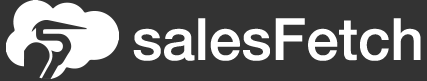
<style>
.page{position:relative;width:427px;height:81px;background:#333333}
.page>*{position:absolute;margin:0}
.t1{font:58.4px "HelveticaNeue-Medium";color:#ffffff}
</style>
<div class="page">
<p class="t1" style="left:133px;top:18px;width:288px;height:43px">salesFetch</p>
</div>
